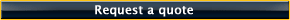
<style>
.page{position:relative;width:290px;height:20px}
.page>*{position:absolute;margin:0}
.t1{font:12px "LucidaSansUnicode";color:#ffffff;font-weight:bold}
</style>
<div class="page">
<p class="t1" style="left:95px;top:5px;width:98px;height:12px">Request a quote</p>
</div>
